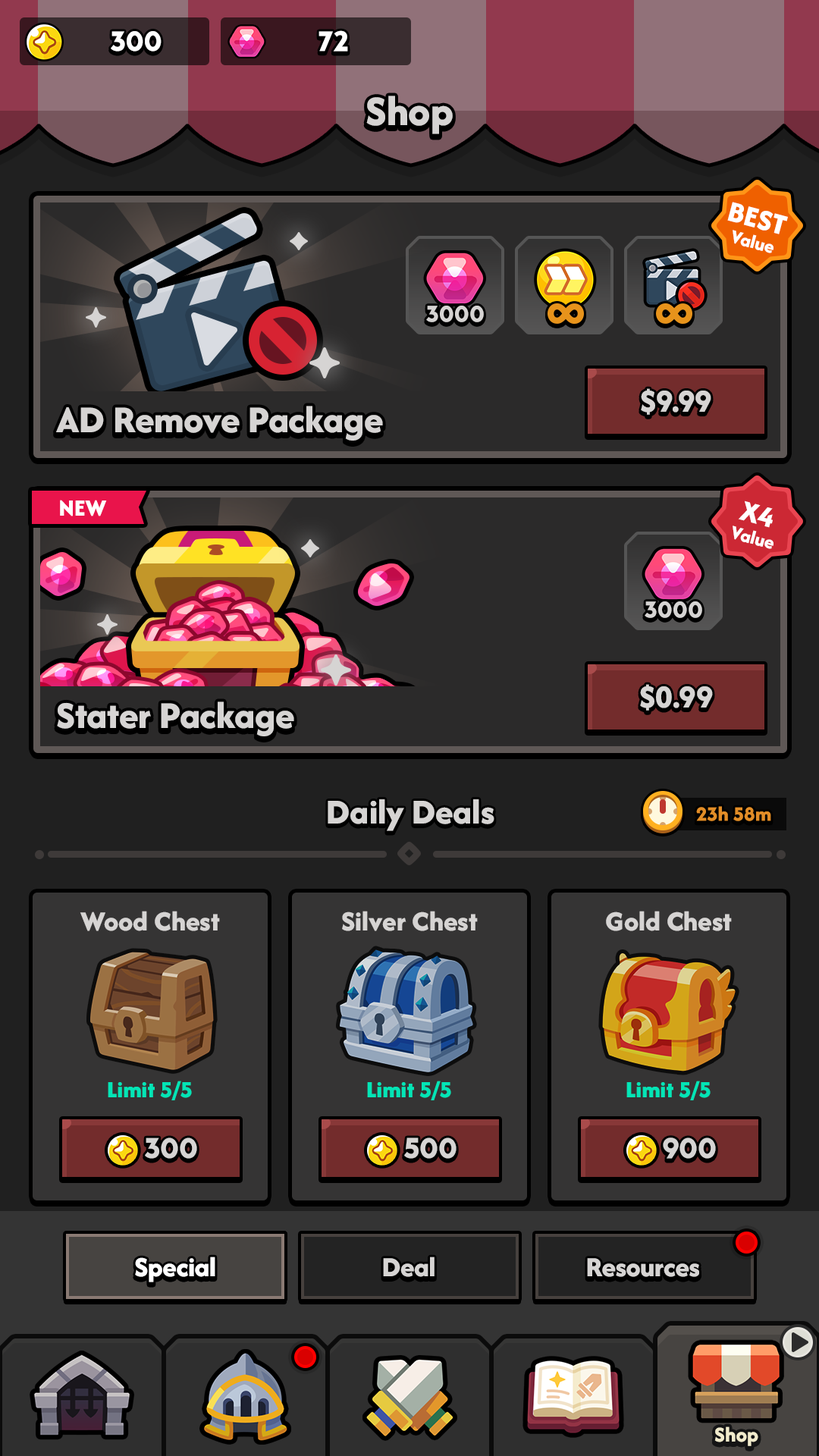
<style>
.page{position:relative;width:819px;height:1456px}
.page>*{position:absolute;margin:0}
.t1{font:29.6px "LTAvocado-Bold";color:#ffffff}
.t2{font:43.7px "AfacadFlux-ExtraBold";color:#d6d4d3}
.t3{font:30.3px "AfacadFlux-ExtraBold";color:#ffffff;text-transform:uppercase}
.t4{font:19.7px "AfacadFlux-ExtraBold";color:#ffffff}
.t5{font:24.3px "LTAvocado-Bold";color:#d6d4d3;text-transform:uppercase}
.t6{font:33.4px "AfacadFlux-ExtraBold";color:#d6d4d3}
.t7{font:39.3px "AfacadFlux-ExtraBold";color:#d6d4d3}
.t8{font:24.3px "AfacadFlux-ExtraBold";color:#ffffff;text-transform:uppercase}
.t9{font:36.4px "AfacadFlux-ExtraBold";color:#d6d4d3}
.t10{font:21.2px "AfacadFlux-ExtraBold";color:#e28d27}
.t11{font:28.8px "AfacadFlux-ExtraBold";color:#d6d4d3}
.t12{font:24.3px "AfacadFlux-ExtraBold";color:#03e5b6}
.t13{font:30.3px "LTAvocado-Bold";color:#d6d4d3}
.t14{font:28.8px "AfacadFlux-ExtraBold";color:#ffffff}
.t15{font:28.4px "AfacadFlux-ExtraBold";color:#ffffff}
.t16{font:22px "AfacadFlux-ExtraBold";color:#f1ebcc}
</style>
<div class="page">
<p class="t1" style="left:111px;top:31px;width:51px;height:21px">300</p>
<p class="t1" style="left:318px;top:30px;width:30px;height:22px">72</p>
<p class="t2" style="left:366px;top:96px;width:87px;height:38px">Shop</p>
<p class="t3" style="left:727px;top:202px;width:61px;height:32px;rotate:15deg">Best</p>
<p class="t4" style="left:733px;top:230px;width:40px;height:23px;rotate:15deg">Value</p>
<p class="t5" style="left:426px;top:306px;width:58px;height:16px">3000</p>
<p class="t6" style="left:641px;top:388px;width:70px;height:27px">$9.99</p>
<p class="t7" style="left:56px;top:406px;width:327px;height:35px">AD Remove Package</p>
<p class="t8" style="left:60px;top:500px;width:47px;height:16px">New</p>
<p class="t3" style="left:738px;top:500px;width:35px;height:28px;rotate:15deg">x4</p>
<p class="t4" style="left:733px;top:526px;width:40px;height:23px;rotate:15deg">Value</p>
<p class="t5" style="left:645px;top:601px;width:57px;height:17px">3000</p>
<p class="t6" style="left:640px;top:684px;width:73px;height:27px">$0.99</p>
<p class="t7" style="left:57px;top:701px;width:237px;height:35px">Stater Package</p>
<p class="t9" style="left:328px;top:799px;width:166px;height:32px">Daily Deals</p>
<p class="t10" style="left:696px;top:806px;width:75px;height:15px">23h 58m</p>
<p class="t11" style="left:80px;top:911px;width:140px;height:20px">Wood Chest</p>
<p class="t11" style="left:342px;top:911px;width:136px;height:20px">Silver Chest</p>
<p class="t11" style="left:606px;top:911px;width:126px;height:20px">Gold Chest</p>
<p class="t12" style="left:108px;top:1081px;width:84px;height:19px">Limit 5/5</p>
<p class="t12" style="left:367px;top:1081px;width:84px;height:19px">Limit 5/5</p>
<p class="t12" style="left:626px;top:1081px;width:85px;height:19px">Limit 5/5</p>
<p class="t13" style="left:145px;top:1137px;width:52px;height:22px">300</p>
<p class="t13" style="left:404px;top:1137px;width:53px;height:22px">500</p>
<p class="t13" style="left:663px;top:1137px;width:53px;height:22px">900</p>
<p class="t14" style="left:135px;top:1257px;width:80px;height:25px">Special</p>
<p class="t15" style="left:136px;top:1257px;width:79px;height:25px">Special</p>
<p class="t11" style="left:383px;top:1257px;width:52px;height:20px">Deal</p>
<p class="t11" style="left:587px;top:1258px;width:112px;height:19px">Resources</p>
<p class="t16" style="left:714px;top:1426px;width:44px;height:20px">Shop</p>
</div>
